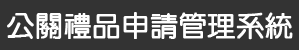
<style>
.page{position:relative;width:299px;height:50px;background:#333333}
.page>*{position:absolute;margin:0}
.t1{font:28px "DFYuan-W5-WIN-BF";color:#ffffff;font-weight:bold}
</style>
<div class="page">
<p class="t1" style="left:7px;top:12px;width:286px;height:28px">公關禮品申請管理系統</p>
</div>
